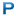
<style>
.page{position:relative;width:16px;height:16px;background:#ffffff}
.page>*{position:absolute;margin:0}
.t1{font:18.1px "CopperplateGothic-Bold";scale:0.93 1}
</style>
<div class="page">
<p class="t1" style="left:2px;top:2px;width:12px;height:13px">P</p>
</div>
